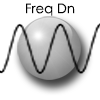
<style>
.page{position:relative;width:100px;height:100px;background:#ffffff}
.page>*{position:absolute;margin:0}
.t1{font:13.3px "CenturyGothic";color:#020202}
</style>
<div class="page">
<p class="t1" style="left:26px;top:3px;width:49px;height:13px">Freq Dn</p>
</div>
